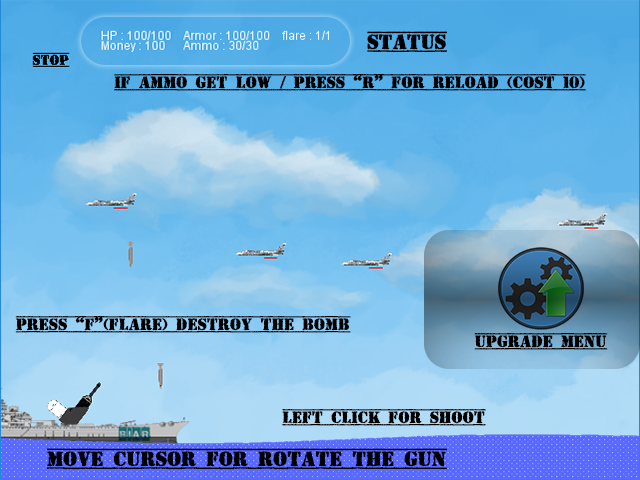
<style>
.page{position:relative;width:640px;height:480px}
.page>*{position:absolute;margin:0}
.t1{font:20.9px "TopSecret";letter-spacing:-0.02em;color:#000000;text-transform:uppercase;font-weight:bold}
.t2{font:16.7px "TopSecret";letter-spacing:-0.02em;color:#000000;text-transform:uppercase;font-weight:bold}
</style>
<div class="page">
<p class="t1" style="left:367px;top:31px;width:80px;height:21px">status</p>
<p class="t2" style="left:114px;top:74px;width:472px;height:17px">if ammo get low / press “r” for reload (cost 10)</p>
<p class="t2" style="left:15px;top:316px;width:336px;height:17px">press “f”(flare) destroy the bomb</p>
<p class="t2" style="left:474px;top:333px;width:134px;height:17px">upgrade menu</p>
<p class="t2" style="left:282px;top:409px;width:204px;height:17px">left click for shoot</p>
<p class="t1" style="left:47px;top:448px;width:400px;height:22px">move CURSOR for rotate the gun</p>
</div>
